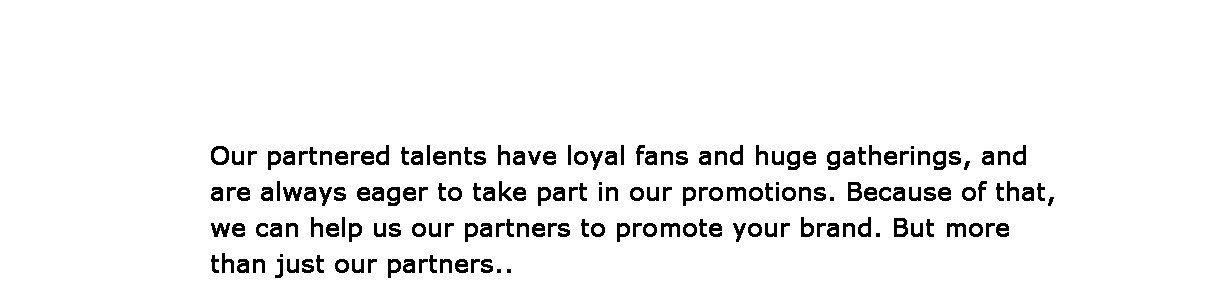
<style>
.page{position:relative;width:1225px;height:300px;background:#ffffff}
.page>*{position:absolute;margin:0}
.t1{font:24px/36px "Verdana";color:#000000;font-weight:bold}
</style>
<div class="page">
<p class="t1" style="left:211px;top:145px;width:843px;height:133px">Our partnered talents have loyal fans and huge gatherings, and are always eager to take part in our promotions. Because of that, we can help us our partners to promote your brand. But more than just our partners..</p>
</div>
